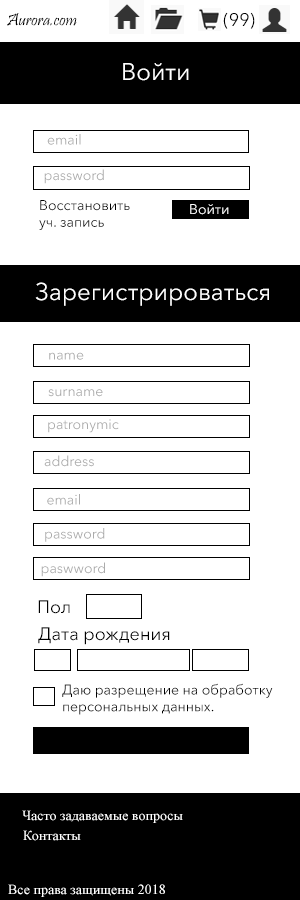
<style>
.page{position:relative;width:300px;height:900px;background:#ffffff}
.page>*{position:absolute;margin:0}
.t1{font:18px "Pristina-Regular";color:#000000}
.t2{font:18px "AvenirNextCyr-Regular";color:#000000}
.t3{font:24px "AvenirNextCyr-Regular";color:#ffffff}
.t4{font:14px "AvenirNextCyr-Regular";color:#ababab}
.t5{font:14px "AvenirNextCyr-Regular";color:#000000}
.t6{font:14px "AvenirNextCyr-Regular";color:#ffffff}
.t7{font:14px "TimesNewRomanPSMT";color:#ffffff}
</style>
<div class="page">
<p class="t1" style="left:7px;top:13px;width:70px;height:13px">Aurora.com</p>
<p class="t2" style="left:223px;top:12px;width:32px;height:17px">(99)</p>
<p class="t3" style="left:123px;top:63px;width:66px;height:18px">Войти</p>
<p class="t4" style="left:47px;top:134px;width:34px;height:11px">email</p>
<p class="t4" style="left:44px;top:169px;width:60px;height:15px">password</p>
<p class="t5" style="left:39px;top:200px;width:91px;height:30px;text-align:right">Восстановить<br>уч. запись</p>
<p class="t6" style="left:190px;top:204px;width:39px;height:11px">Войти</p>
<p class="t3" style="left:35px;top:282px;width:234px;height:24px">Зарегистрироваться</p>
<p class="t4" style="left:49px;top:352px;width:35px;height:8px">name</p>
<p class="t4" style="left:48px;top:389px;width:55px;height:8px">surname</p>
<p class="t4" style="left:48px;top:419px;width:71px;height:14px">patronymic</p>
<p class="t4" style="left:44px;top:455px;width:50px;height:12px">address</p>
<p class="t4" style="left:47px;top:494px;width:33px;height:11px">email</p>
<p class="t4" style="left:45px;top:528px;width:60px;height:14px">password</p>
<p class="t4" style="left:41px;top:562px;width:64px;height:15px">paswword</p>
<p class="t2" style="left:38px;top:600px;width:32px;height:14px">Пол</p>
<p class="t2" style="left:38px;top:627px;width:132px;height:18px">Дата рождения</p>
<p class="t5" style="left:62px;top:683px;width:211px;height:32px;text-align:right">Даю разрещение на обработку <br>персональных данных.</p>
<p class="t7" style="left:22px;top:810px;width:161px;height:13px">Часто задаваемые вопросы</p>
<p class="t7" style="left:23px;top:830px;width:58px;height:11px">Контакты</p>
<p class="t7" style="left:8px;top:884px;width:157px;height:13px">Все права защищены 2018</p>
</div>
